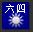
<style>
.page{position:relative;width:33px;height:32px;background:#000090}
.page>*{position:absolute;margin:0}
.t1{font:10.4px "SimSun";color:#ffffff}
</style>
<div class="page">
<p class="t1" style="left:5px;top:4px;width:20px;height:9px">六四</p>
</div>
